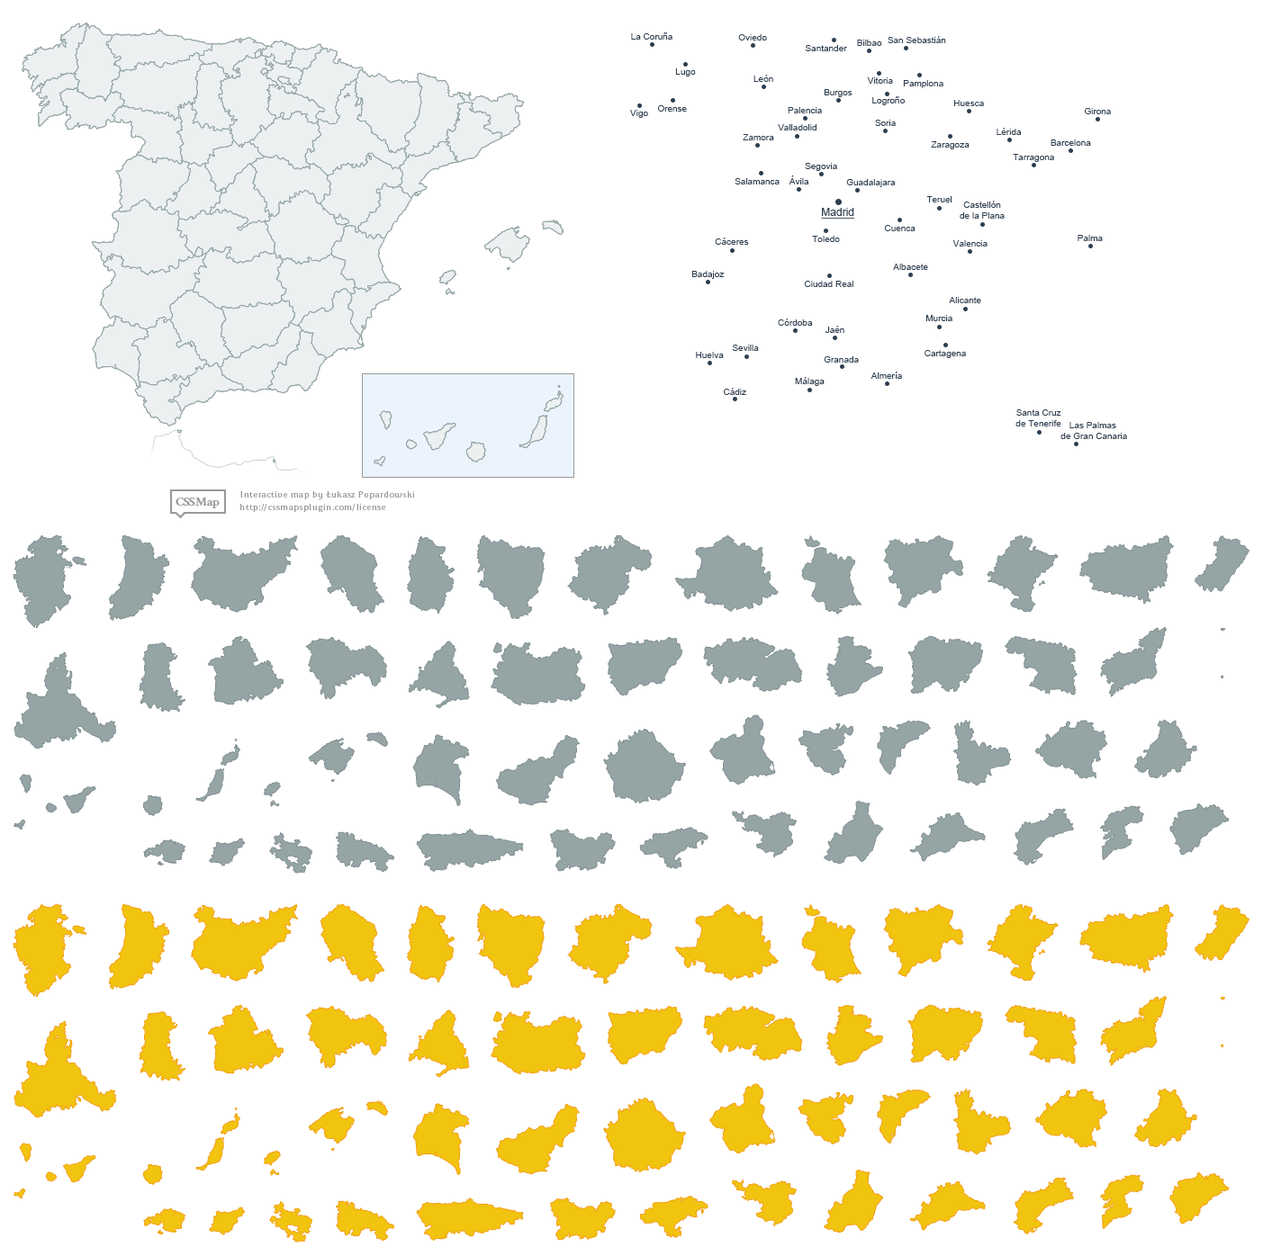
<style>
.page{position:relative;width:1263px;height:1256px;background:#ffffff}
.page>*{position:absolute;margin:0}
.t1{font:9px "ArialMT";color:#2c3e50}
.t2{font:10.8px "ArialMT";color:#2c3e50;text-decoration:underline}
</style>
<div class="page">
<p class="t1" style="left:631px;top:32px;width:41px;height:8px">La Coruña</p>
<p class="t1" style="left:738px;top:34px;width:29px;height:7px">Oviedo</p>
<p class="t1" style="left:857px;top:40px;width:25px;height:6px">Bilbao</p>
<p class="t1" style="left:887px;top:36px;width:59px;height:7px">San Sebastián</p>
<p class="t1" style="left:805px;top:45px;width:42px;height:6px">Santander</p>
<p class="t1" style="left:675px;top:68px;width:21px;height:9px">Lugo</p>
<p class="t1" style="left:753px;top:75px;width:20px;height:7px">León</p>
<p class="t1" style="left:867px;top:77px;width:26px;height:7px">Vitoria</p>
<p class="t1" style="left:824px;top:89px;width:28px;height:8px">Burgos</p>
<p class="t1" style="left:903px;top:80px;width:40px;height:8px">Pamplona</p>
<p class="t1" style="left:872px;top:96px;width:33px;height:9px">Logroño</p>
<p class="t1" style="left:954px;top:100px;width:30px;height:6px">Huesca</p>
<p class="t1" style="left:630px;top:110px;width:18px;height:8px">Vigo</p>
<p class="t1" style="left:657px;top:105px;width:30px;height:7px">Orense</p>
<p class="t1" style="left:788px;top:107px;width:34px;height:6px">Palencia</p>
<p class="t1" style="left:1085px;top:108px;width:26px;height:6px">Girona</p>
<p class="t1" style="left:778px;top:124px;width:38px;height:7px">Valladolid</p>
<p class="t1" style="left:875px;top:120px;width:21px;height:6px">Soria</p>
<p class="t1" style="left:743px;top:134px;width:31px;height:6px">Zamora</p>
<p class="t1" style="left:996px;top:128px;width:26px;height:7px">Lérida</p>
<p class="t1" style="left:931px;top:141px;width:38px;height:8px">Zaragoza</p>
<p class="t1" style="left:1050px;top:140px;width:41px;height:6px">Barcelona</p>
<p class="t1" style="left:1013px;top:154px;width:41px;height:8px">Tarragona</p>
<p class="t1" style="left:805px;top:163px;width:32px;height:8px">Segovia</p>
<p class="t1" style="left:734px;top:178px;width:45px;height:7px">Salamanca</p>
<p class="t1" style="left:788px;top:176px;width:21px;height:9px">Ávila</p>
<p class="t1" style="left:846px;top:179px;width:50px;height:8px">Guadalajara</p>
<p class="t1" style="left:926px;top:196px;width:26px;height:7px">Teruel</p>
<p class="t2" style="left:821px;top:208px;width:33px;height:11px">Madrid</p>
<p class="t1" style="left:959px;top:201px;width:45px;height:18px;text-align:center">Castellón<br>de la Plana</p>
<p class="t1" style="left:884px;top:225px;width:31px;height:6px">Cuenca</p>
<p class="t1" style="left:715px;top:238px;width:34px;height:7px">Cáceres</p>
<p class="t1" style="left:812px;top:236px;width:28px;height:6px">Toledo</p>
<p class="t1" style="left:952px;top:240px;width:35px;height:7px">Valencia</p>
<p class="t1" style="left:1077px;top:235px;width:26px;height:6px">Palma</p>
<p class="t1" style="left:893px;top:264px;width:35px;height:6px">Albacete</p>
<p class="t1" style="left:691px;top:271px;width:34px;height:8px">Badajoz</p>
<p class="t1" style="left:804px;top:281px;width:49px;height:6px">Ciudad Real</p>
<p class="t1" style="left:949px;top:297px;width:32px;height:6px">Alicante</p>
<p class="t1" style="left:925px;top:315px;width:27px;height:6px">Murcia</p>
<p class="t1" style="left:778px;top:319px;width:35px;height:7px">Córdoba</p>
<p class="t1" style="left:824px;top:326px;width:20px;height:7px">Jaén</p>
<p class="t1" style="left:696px;top:352px;width:28px;height:6px">Huelva</p>
<p class="t1" style="left:732px;top:345px;width:27px;height:6px">Sevilla</p>
<p class="t1" style="left:924px;top:350px;width:42px;height:8px">Cartagena</p>
<p class="t1" style="left:824px;top:356px;width:35px;height:7px">Granada</p>
<p class="t1" style="left:795px;top:377px;width:29px;height:9px">Málaga</p>
<p class="t1" style="left:870px;top:372px;width:32px;height:7px">Almería</p>
<p class="t1" style="left:723px;top:388px;width:23px;height:7px">Cádiz</p>
<p class="t1" style="left:1015px;top:410px;width:46px;height:17px;text-align:center">Santa Cruz<br>de Tenerife</p>
<p class="t1" style="left:1060px;top:422px;width:67px;height:17px;text-align:center">Las Palmas <br>de Gran Canaria</p>
</div>
